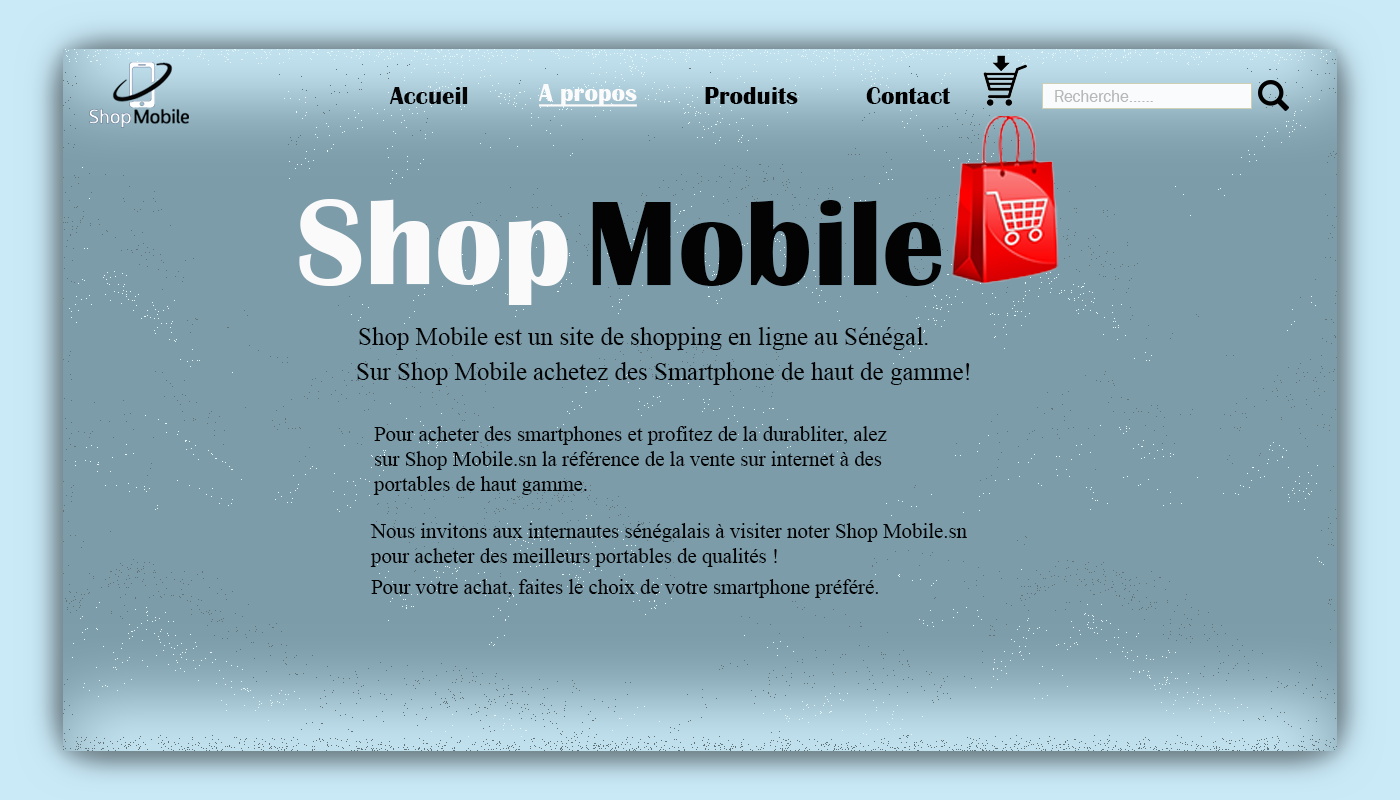
<style>
.page{position:relative;width:1400px;height:800px;background:#7c9caa}
.page>*{position:absolute;margin:0}
.t1{font:25px "BritannicBold";color:#050505}
.t2{font:25px "BritannicBold";color:#fcfbfb;text-decoration:underline}
.t3{font:25px "BritannicBold";color:#000000}
.t4{font:16.7px "FranklinGothic-Book";color:#b7b8b9}
.t5{font:125px "BritannicBold";color:#fafafb}
.t6{font:125px "BritannicBold";color:#030303}
.t7{font:25px "TimesNewRomanPSMT";color:#030303}
.t8{font:20.8px "TimesNewRomanPSMT";color:#030303}
</style>
<div class="page">
<p class="t1" style="left:389px;top:86px;width:79px;height:18px">Accueil</p>
<p class="t2" style="left:538px;top:84px;width:99px;height:23px">A propos</p>
<p class="t3" style="left:705px;top:86px;width:93px;height:18px">Produits</p>
<p class="t3" style="left:866px;top:87px;width:85px;height:17px">Contact</p>
<p class="t4" style="left:1055px;top:90px;width:98px;height:12px">Recherche......</p>
<p class="t5" style="left:299px;top:199px;width:269px;height:106px">Shop</p>
<p class="t6" style="left:592px;top:200px;width:350px;height:86px">Mobile</p>
<p class="t7" style="left:359px;top:327px;width:569px;height:23px">Shop Mobile est un site de shopping en ligne au Sénégal.</p>
<p class="t7" style="left:357px;top:362px;width:613px;height:23px">Sur Shop Mobile achetez des Smartphone de haut de gamme!</p>
<p class="t8" style="left:373px;top:426px;width:514px;height:69px">Pour acheter des smartphones et profitez de la durabliter, alez <br>sur Shop Mobile.sn la référence de la vente sur internet à des <br>portables de haut gamme.</p>
<p class="t8" style="left:370px;top:523px;width:597px;height:44px">Nous invitons aux internautes sénégalais à visiter noter Shop Mobile.sn<br>pour acheter des meilleurs portables de qualités !</p>
<p class="t8" style="left:371px;top:579px;width:507px;height:19px">Pour votre achat, faites le choix de votre smartphone préféré.</p>
</div>
